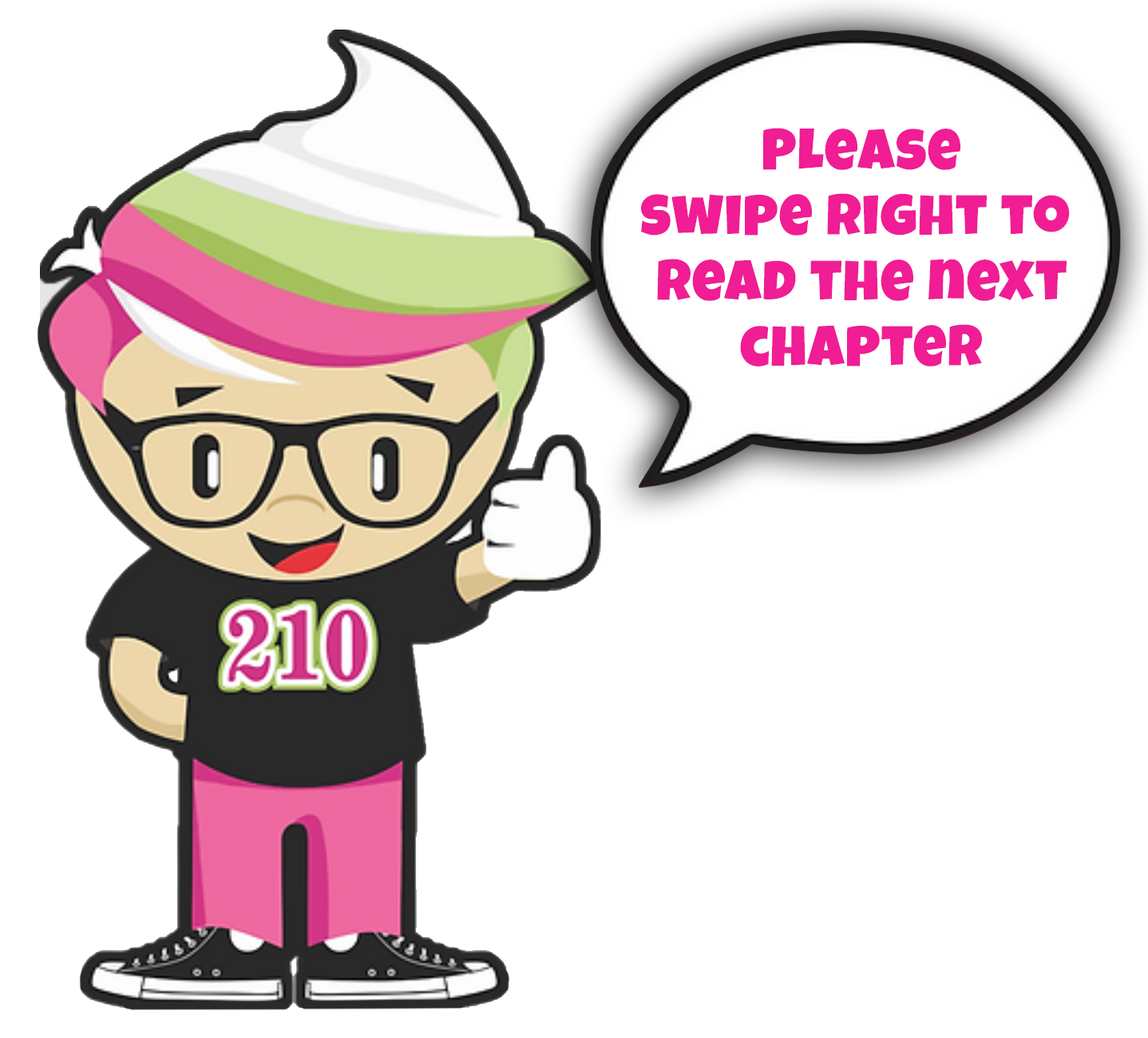
<style>
.page{position:relative;width:1148px;height:1038px;background:#ffffff}
.page>*{position:absolute;margin:0}
.t1{font:57.5px/65.5px "LuckiestGuy-Regular";letter-spacing:0.025em;color:#f01d94}
</style>
<div class="page">
<p class="t1" style="left:641px;top:128px;width:429px;height:239px;text-align:center">Please<br>swipe right to <br>read the next<br>chapter</p>
</div>
